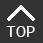
<style>
.page{position:relative;width:43px;height:43px;background:#333333}
.page>*{position:absolute;margin:0}
.t1{font:18px "Consolas";color:#ffffff}
</style>
<div class="page">
<p class="t1" style="left:6px;top:26px;width:29px;height:11px">TOP</p>
</div>
